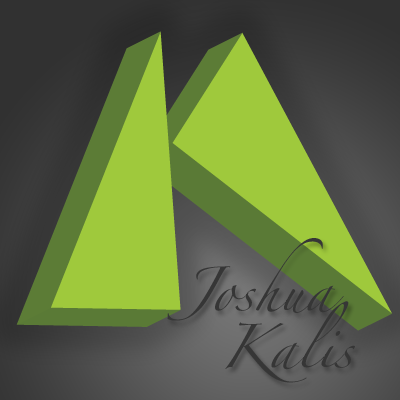
<style>
.page{position:relative;width:400px;height:400px;background:#9fc93c}
.page>*{position:absolute;margin:0}
.t1{font:39.2px/57.1px "Zapfino";color:#363636}
</style>
<div class="page">
<p class="t1" style="left:167px;top:238px;width:188px;height:145px;text-align:right">Joshua <br>Kalis</p>
</div>
